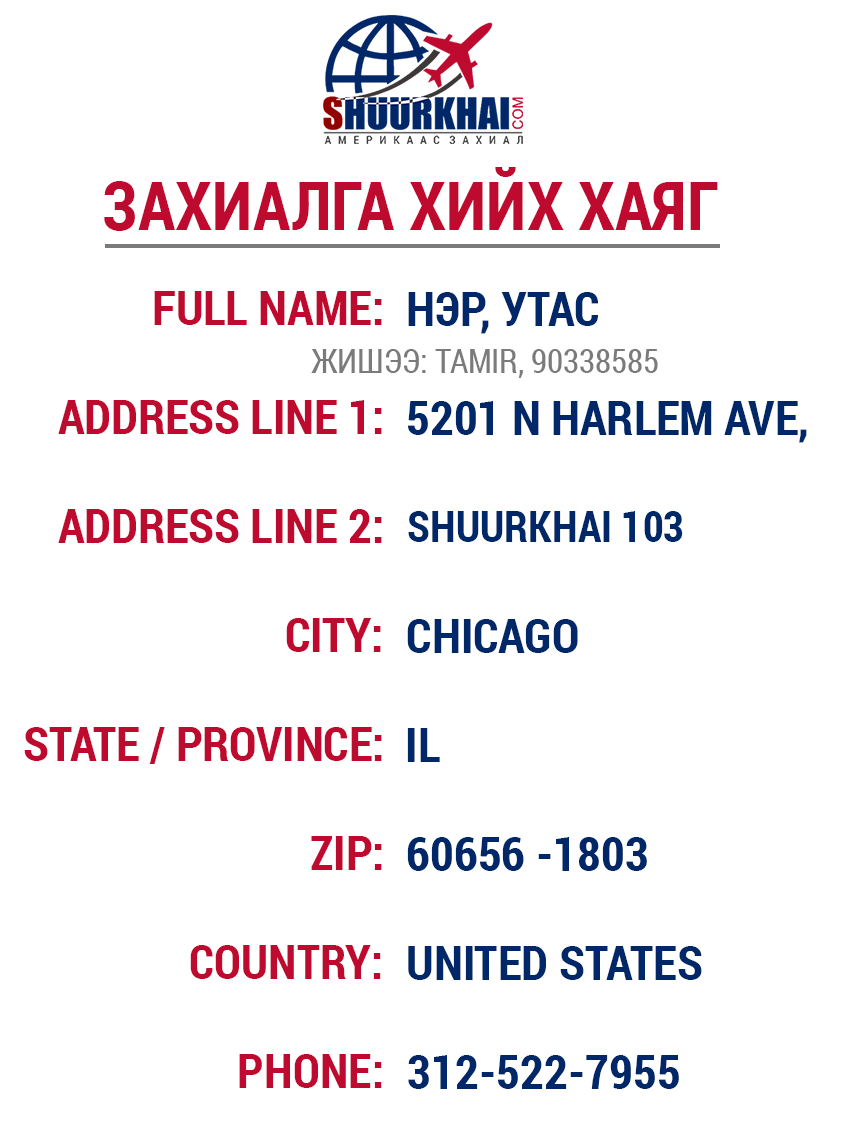
<style>
.page{position:relative;width:850px;height:1134px;background:#ffffff}
.page>*{position:absolute;margin:0}
.t1{font:67.8px "RobotoCondensed-Bold";color:#bf0a30;text-transform:uppercase}
.t2{font:47.9px "RobotoCondensed-Bold";color:#bf0a30;text-transform:uppercase}
.t3{font:47.9px "RobotoCondensed-Bold";color:#002868;text-transform:uppercase}
.t4{font:32.8px "RobotoCondensed-Regular";color:#7b7b7b;text-transform:uppercase}
.t5{font:42.6px "RobotoCondensed-Bold";color:#002868;text-transform:uppercase}
</style>
<div class="page">
<p class="t1" style="left:104px;top:167px;width:614px;height:64px">Захиалга хийх хаяг</p>
<p class="t2" style="left:154px;top:291px;width:228px;height:34px">FULL NAME:</p>
<p class="t3" style="left:408px;top:292px;width:191px;height:42px">НЭР, утас</p>
<p class="t4" style="left:311px;top:349px;width:347px;height:29px">жИШЭЭ: TAMIR, 90338585</p>
<p class="t2" style="left:58px;top:400px;width:324px;height:34px">address line 1:</p>
<p class="t3" style="left:408px;top:401px;width:399px;height:42px">5201 N Harlem Ave,</p>
<p class="t2" style="left:58px;top:509px;width:324px;height:34px">address line 2:</p>
<p class="t5" style="left:408px;top:511px;width:275px;height:31px">SHUURKHAI 103</p>
<p class="t2" style="left:286px;top:618px;width:95px;height:34px">city:</p>
<p class="t3" style="left:407px;top:619px;width:171px;height:34px">chicago</p>
<p class="t2" style="left:24px;top:727px;width:358px;height:37px">STATE / PrOVINCE:</p>
<p class="t3" style="left:407px;top:728px;width:33px;height:34px">IL</p>
<p class="t2" style="left:311px;top:836px;width:71px;height:34px">ZIP:</p>
<p class="t3" style="left:407px;top:837px;width:240px;height:34px">60656 -1803</p>
<p class="t2" style="left:190px;top:945px;width:191px;height:34px">COUNTRY:</p>
<p class="t3" style="left:408px;top:946px;width:294px;height:34px">UNITED STATES</p>
<p class="t2" style="left:239px;top:1054px;width:143px;height:34px">PHONE:</p>
<p class="t3" style="left:408px;top:1055px;width:271px;height:34px">312-522-7955</p>
</div>
